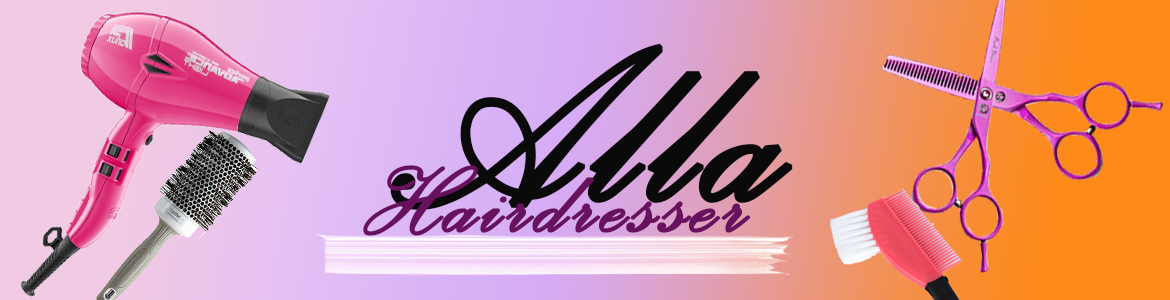
<style>
.page{position:relative;width:1170px;height:300px}
.page>*{position:absolute;margin:0}
.t1{font:286.7px "PalaceScriptMT";letter-spacing:0.02em;color:#0b0a0a;font-weight:bold}
.t2{font:120px "PalaceScriptMT";letter-spacing:0.02em;color:#68125f;font-weight:bold}
</style>
<div class="page">
<p class="t1" style="left:390px;top:43px;width:403px;height:167px">Alla</p>
<p class="t2" style="left:363px;top:165px;width:388px;height:71px">Hairdresser</p>
</div>
